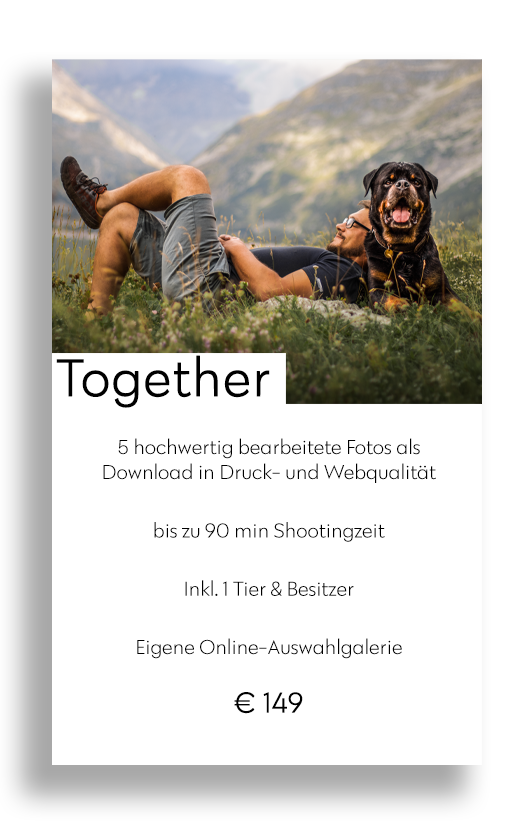
<style>
.page{position:relative;width:532px;height:825px;background:#ffffff}
.page>*{position:absolute;margin:0}
.t1{font:54.4px "Klik-Light";color:#000000;font-weight:bold}
.t2{font:20.8px/58.3px "Klik-Light";color:#000000}
.t3{font:20.8px/54.2px "Klik-Light";color:#000000}
.t4{font:20.8px "Klik-Light";color:#000000}
.t5{font:29.2px/58.3px "Klik-Light";color:#000000;font-weight:bold}
</style>
<div class="page">
<p class="t1" style="left:56px;top:355px;width:214px;height:53px">Together</p>
<p class="t2" style="left:103px;top:438px;width:333px;height:276px;text-align:center"><span class="t3">5 hochwertig bearbeitete Fotos als<br></span><span class="t4">Download in Druck- und Webqualität<br></span>bis zu 90 min Shootingzeit<br>Inkl. 1 Tier &amp; Besitzer<br>Eigene Online-Auswahlgalerie<br><span class="t5">€ 149</span></p>
</div>
